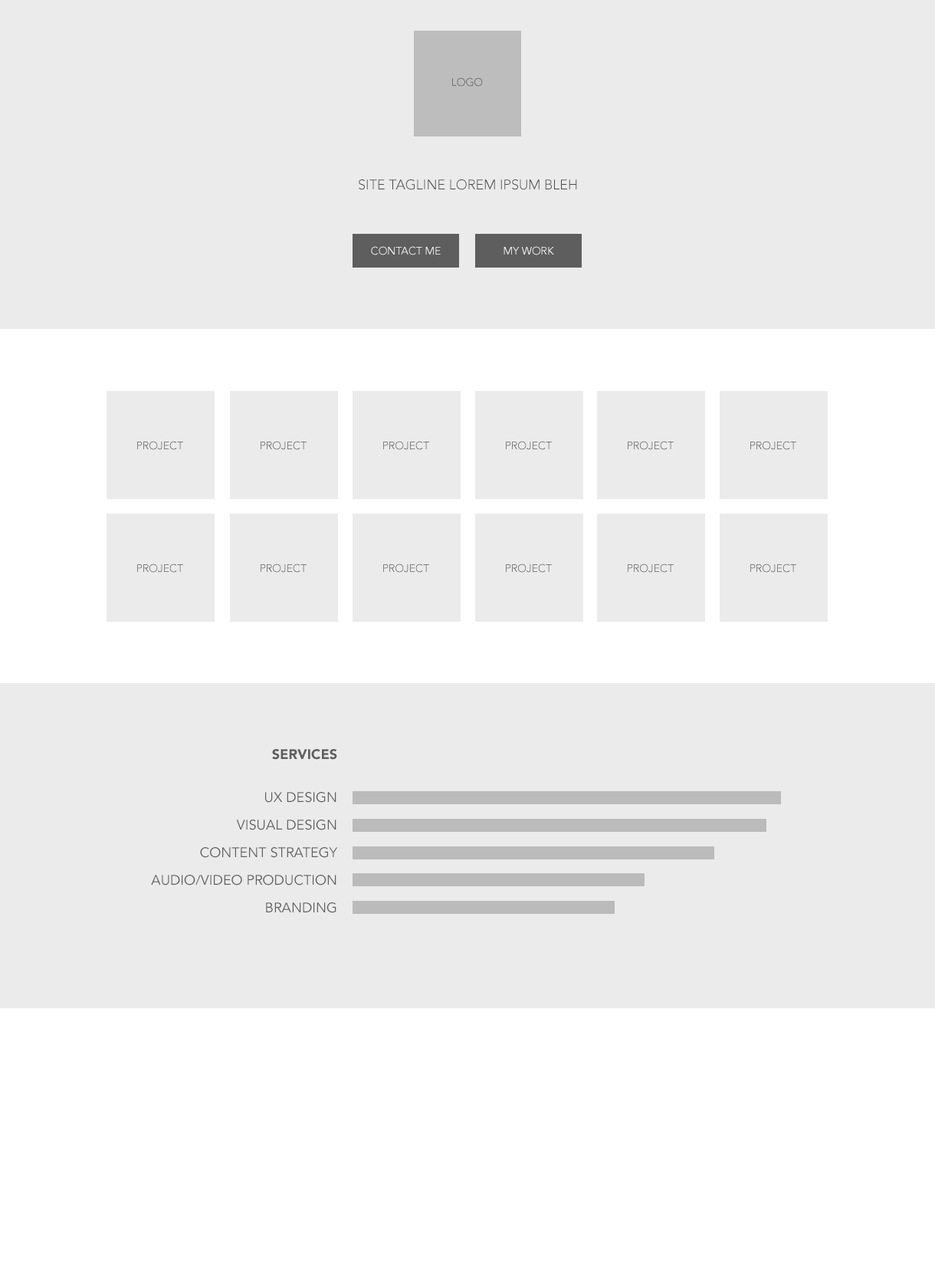
<style>
.page{position:relative;width:935px;height:1275px;background:#ebebeb}
.page>*{position:absolute;margin:0}
.t1{font:10.7px "Avenir-Light";text-transform:uppercase}
.t2{font:13.8px "Avenir-Light";color:#4b4b4b;text-transform:uppercase}
.t3{font:10.7px "Avenir-Light";color:#ffffff;text-transform:uppercase}
.t4{font:13.8px/27.6px "Avenir-Book";color:#5e5e5e;text-transform:uppercase}
.t5{font:13.8px/27.6px "Avenir-Black";color:#5e5e5e;text-transform:uppercase}
.t6{font:13.8px/42.9px "Avenir-Book";color:#5e5e5e;text-transform:uppercase}
</style>
<div class="page">
<p class="t1" style="left:452px;top:77px;width:31px;height:10px">Logo</p>
<p class="t2" style="left:359px;top:179px;width:218px;height:11px">Site tagline Lorem ipsum bleh</p>
<p class="t3" style="left:371px;top:246px;width:70px;height:9px">Contact me</p>
<p class="t3" style="left:504px;top:246px;width:50px;height:9px">My WORK</p>
<p class="t1" style="left:137px;top:441px;width:46px;height:9px">Project</p>
<p class="t1" style="left:261px;top:441px;width:46px;height:9px">Project</p>
<p class="t1" style="left:383px;top:441px;width:46px;height:9px">Project</p>
<p class="t1" style="left:506px;top:441px;width:46px;height:9px">Project</p>
<p class="t1" style="left:628px;top:441px;width:46px;height:9px">Project</p>
<p class="t1" style="left:751px;top:441px;width:46px;height:9px">Project</p>
<p class="t1" style="left:137px;top:563px;width:46px;height:10px">Project</p>
<p class="t1" style="left:261px;top:563px;width:46px;height:10px">Project</p>
<p class="t1" style="left:383px;top:563px;width:46px;height:10px">Project</p>
<p class="t1" style="left:506px;top:563px;width:46px;height:10px">Project</p>
<p class="t1" style="left:628px;top:563px;width:46px;height:10px">Project</p>
<p class="t1" style="left:751px;top:563px;width:46px;height:10px">Project</p>
<p class="t4" style="left:151px;top:749px;width:187px;height:164px;text-align:right"><span class="t5">Services<br></span><span class="t6">UX Design<br></span>Visual Design<br>Content Strategy<br>Audio/Video Production<br>Branding</p>
</div>
